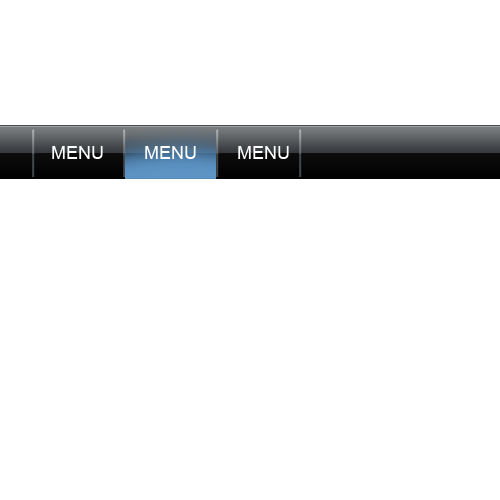
<style>
.page{position:relative;width:500px;height:500px;background:#ffffff}
.page>*{position:absolute;margin:0}
.t1{font:18px "ArialMT";color:#ffffff}
</style>
<div class="page">
<p class="t1" style="left:52px;top:146px;width:51px;height:13px">MENU</p>
<p class="t1" style="left:145px;top:146px;width:51px;height:13px">MENU</p>
<p class="t1" style="left:238px;top:146px;width:51px;height:13px">MENU</p>
</div>
